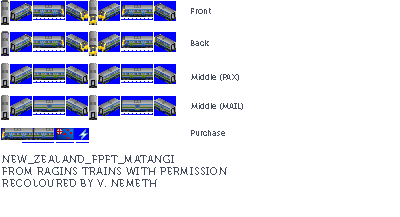
<style>
.page{position:relative;width:400px;height:217px;background:#ffffff}
.page>*{position:absolute;margin:0}
.t1{font:8px "Museo700-Regular";color:#444c5c}
.t2{font:10px "Museo700-Regular";letter-spacing:0.075em;color:#444c5c;text-transform:uppercase}
</style>
<div class="page">
<p class="t1" style="left:191px;top:8px;width:20px;height:6px">Front</p>
<p class="t1" style="left:191px;top:40px;width:18px;height:6px">Back</p>
<p class="t1" style="left:191px;top:74px;width:48px;height:7px">Middle (PAX)</p>
<p class="t1" style="left:191px;top:103px;width:52px;height:7px">Middle (MAIL)</p>
<p class="t1" style="left:191px;top:130px;width:34px;height:6px">Purchase</p>
<p class="t2" style="left:2px;top:155px;width:225px;height:32px">New_Zealand_FPFT_Matangi<br>from ragins trains with permission<br>recoloured by v. nemeth</p>
</div>
